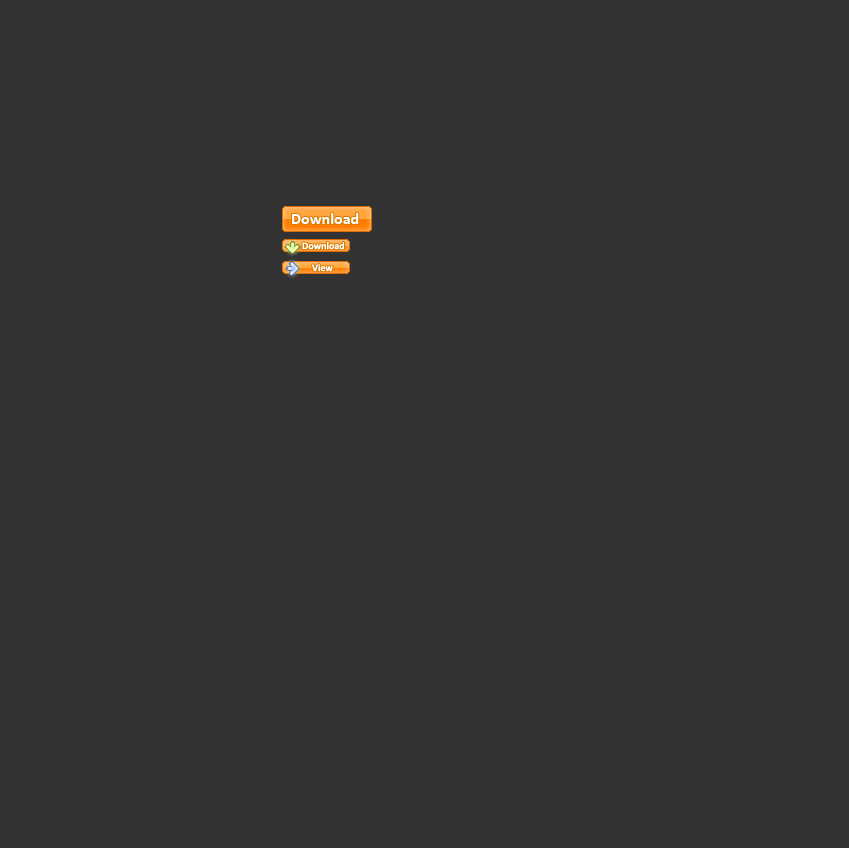
<style>
.page{position:relative;width:849px;height:848px;background:#333333}
.page>*{position:absolute;margin:0}
.t1{font:16px "Calibri-Bold";color:#ffffff}
.t2{font:10px "Calibri-Bold";color:#ffffff}
</style>
<div class="page">
<p class="t1" style="left:292px;top:213px;width:67px;height:11px">Download</p>
<p class="t2" style="left:302px;top:242px;width:42px;height:8px">Download</p>
<p class="t2" style="left:312px;top:264px;width:21px;height:8px">View</p>
</div>
